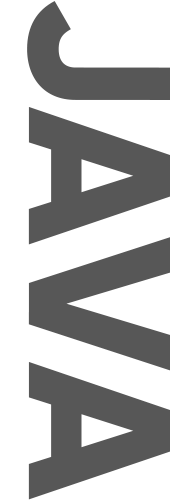
<style>
.page{position:relative;width:170px;height:500px;background:#ffffff}
.page>*{position:absolute;margin:0}
.t1{font:202px "Gilroy-ExtraBold";color:#575757}
</style>
<div class="page">
<p class="t1" style="left:27px;top:1px;width:145px;height:499px;rotate:90deg">JAVA</p>
</div>
